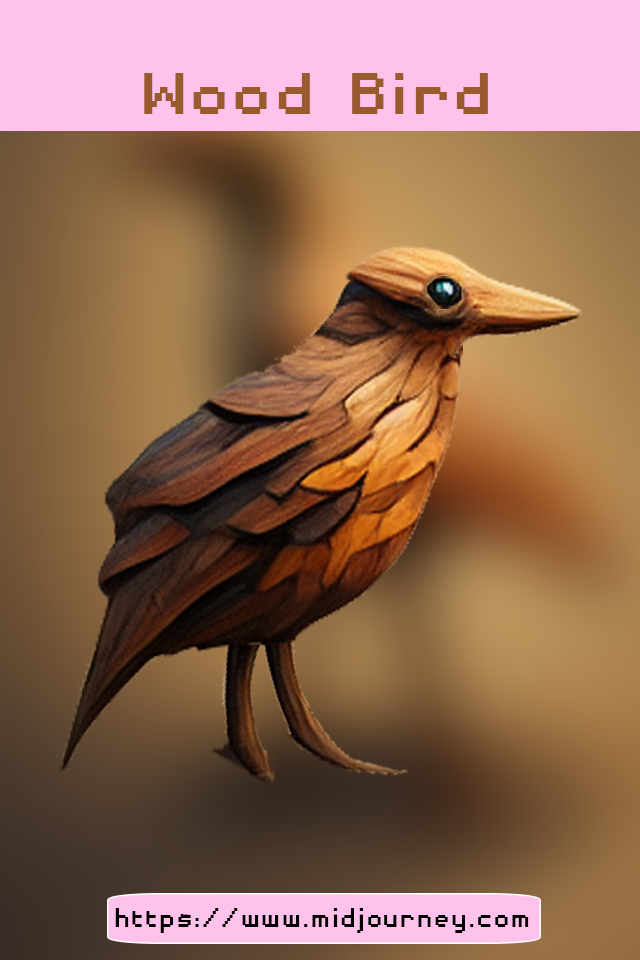
<style>
.page{position:relative;width:640px;height:960px}
.page>*{position:absolute;margin:0}
.t1{font:76.6px "DisposableDroidBB";color:#995b2d;scale:1.14 1}
.t2{font:35.3px "DisposableDroidBB";color:#000000}
</style>
<div class="page">
<p class="t1" style="left:144px;top:73px;width:344px;height:41px">Wood Bird</p>
<p class="t2" style="left:115px;top:908px;width:414px;height:25px">https://www.midjourney.com</p>
</div>
